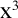
<style>
.page{position:relative;width:18px;height:18px;background:#ffffff}
.page>*{position:absolute;margin:0}
.t1{font:24px "TimesNewRomanPSMT";color:#000000}
</style>
<div class="page">
<p class="t1" style="left:0px;top:0px;width:18px;height:18px">x3</p>
</div>
